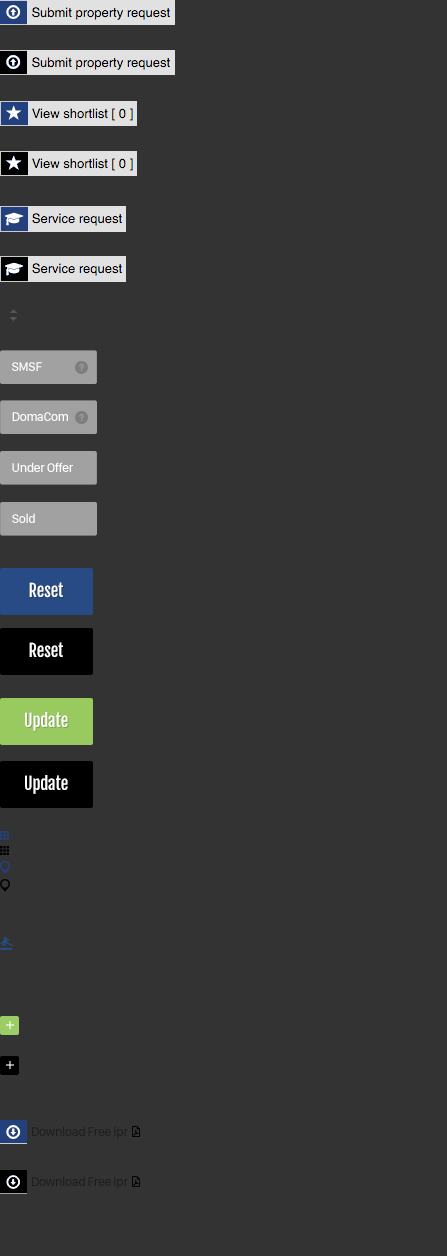
<style>
.page{position:relative;width:447px;height:1256px;background:#333333}
.page>*{position:absolute;margin:0}
.t1{font:13.1px "SanFranciscoDisplay-Medium";letter-spacing:-0.025em;color:#ffffff}
.t2{font:17px "FjallaOne";letter-spacing:-0.01em;color:#ffffff}
.t3{font:13px "SanFranciscoDisplay-Medium";letter-spacing:-0.025em;color:#1e1e1e}
</style>
<div class="page">
<p class="t1" style="left:12px;top:362px;width:30px;height:9px">SMSF</p>
<p class="t1" style="left:12px;top:412px;width:56px;height:9px">DomaCom</p>
<p class="t1" style="left:12px;top:462px;width:61px;height:10px">Under Offer</p>
<p class="t1" style="left:12px;top:513px;width:23px;height:10px">Sold</p>
<p class="t2" style="left:29px;top:582px;width:34px;height:16px">Reset</p>
<p class="t2" style="left:29px;top:642px;width:34px;height:16px">Reset</p>
<p class="t2" style="left:25px;top:712px;width:43px;height:19px">Update</p>
<p class="t2" style="left:25px;top:775px;width:43px;height:19px">Update</p>
<p class="t3" style="left:32px;top:1126px;width:96px;height:13px">Download Free ipr</p>
<p class="t3" style="left:32px;top:1176px;width:96px;height:13px">Download Free ipr</p>
</div>
